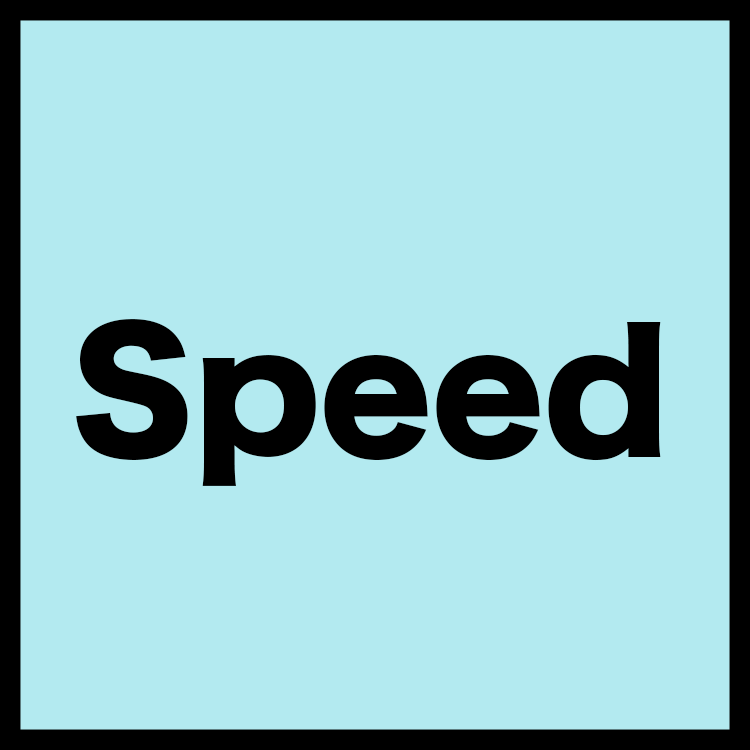
<style>
.page{position:relative;width:750px;height:750px;background:#b3eaf0}
.page>*{position:absolute;margin:0}
.t1{font:162.8px "HiraKakuStdN-W8";color:#000000}
</style>
<div class="page">
<p class="t1" style="left:76px;top:319px;width:585px;height:167px">Speed</p>
</div>
